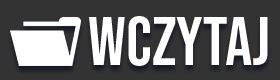
<style>
.page{position:relative;width:280px;height:80px;background:#333333}
.page>*{position:absolute;margin:0}
.t1{font:67.9px "BebasNeue-Regular";color:#ffffff}
</style>
<div class="page">
<p class="t1" style="left:89px;top:16px;width:179px;height:50px">Wczytaj</p>
</div>
